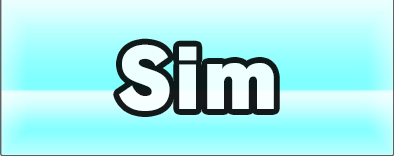
<style>
.page{position:relative;width:394px;height:156px}
.page>*{position:absolute;margin:0}
.t1{font:80px "RodinPro-UB";color:#ffffff}
</style>
<div class="page">
<p class="t1" style="left:119px;top:44px;width:155px;height:67px">Sim</p>
</div>
